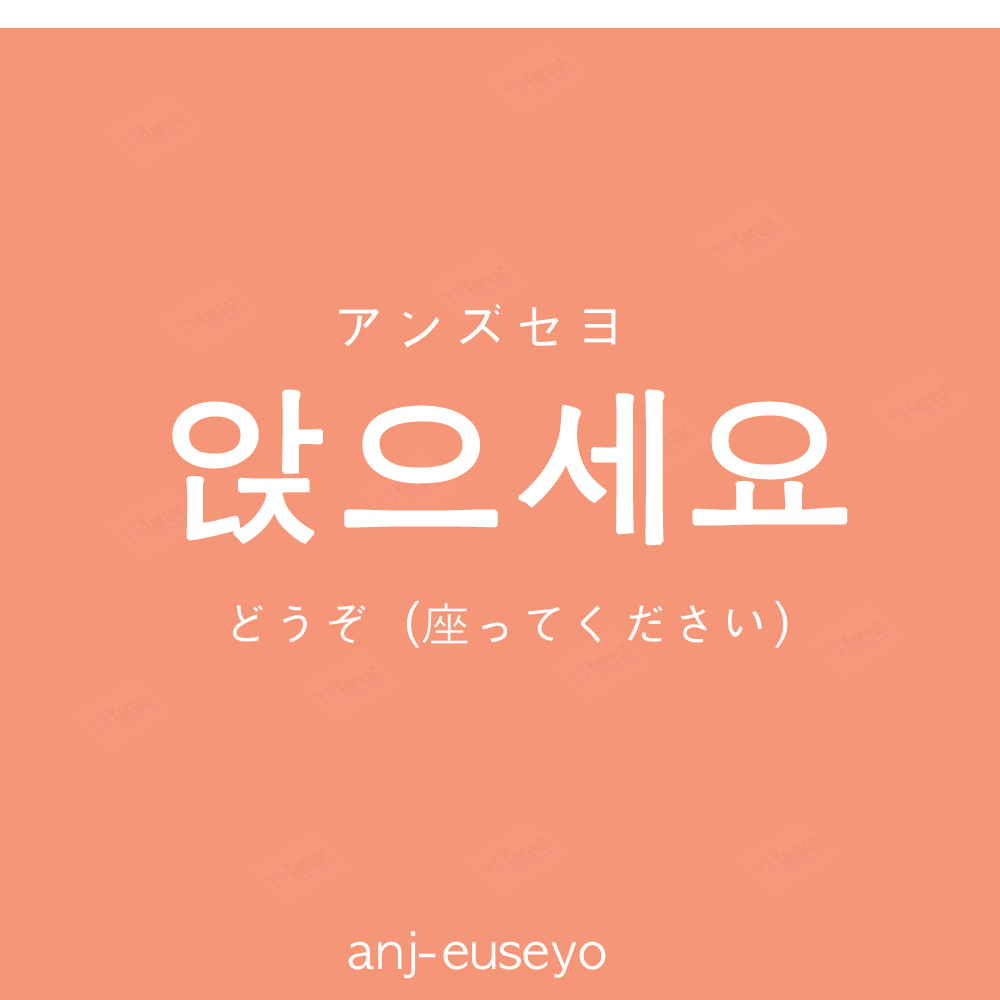
<style>
.page{position:relative;width:1000px;height:1000px;background:#f69679}
.page>*{position:absolute;margin:0}
.t1{font:60px "AppleGothic";color:#ffffff;text-transform:uppercase}
.t2{font:170px "AppleGothic";color:#ffffff;font-weight:bold}
.t3{font:50px "AppleGothic";color:#ffffff}
</style>
<div class="page">
<p class="t1" style="left:339px;top:304px;width:277px;height:44px">アンズセヨ</p>
<p class="t2" style="left:172px;top:389px;width:676px;height:157px">앉으세요</p>
<p class="t3" style="left:233px;top:600px;width:555px;height:48px">どうぞ（座ってください)</p>
<p class="t3" style="left:348px;top:931px;width:258px;height:48px">anj-euseyo</p>
</div>
